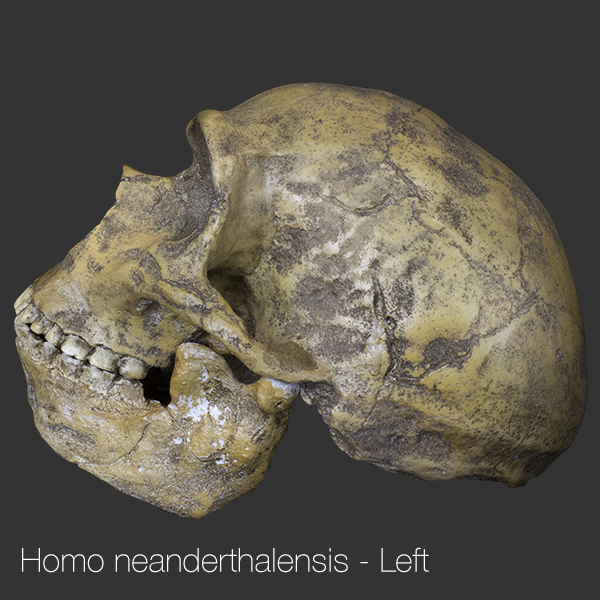
<style>
.page{position:relative;width:600px;height:600px;background:#333333}
.page>*{position:absolute;margin:0}
.t1{font:33.3px "HelveticaNeue-Thin";color:#ffffff}
</style>
<div class="page">
<p class="t1" style="left:22px;top:547px;width:407px;height:26px">Homo neanderthalensis - Left</p>
</div>
